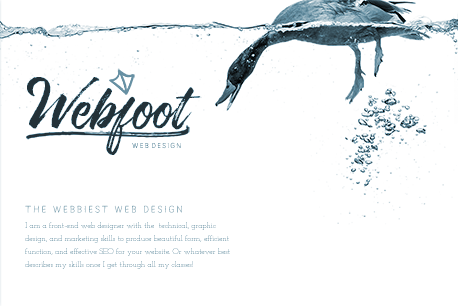
<style>
.page{position:relative;width:458px;height:306px;background:#ffffff}
.page>*{position:absolute;margin:0}
.t1{font:69.6px "TwilightScript";color:#233239}
.t2{font:78.3px "TwilightScript";color:#233239}
.t3{font:69.6px "TwilightScript";letter-spacing:-0.025em;color:#233239}
.t4{font:7.2px "MilaScript-SansLight"}
.t5{font:7.2px "MilaScript-SansLight";letter-spacing:0.2em}
.t6{font:9.6px "MilaScript-SansLight"}
.t7{font:8px/12.8px "JosefinSlab";letter-spacing:-0.01em}
</style>
<div class="page">
<p class="t1" style="left:27px;top:77px;width:174px;height:78px"><span class="t2">W</span>e<span class="t3">b</span>foot</p>
<p class="t4" style="left:132px;top:142px;width:49px;height:7px">we<span class="t5">b</span>design</p>
<p class="t6" style="left:25px;top:205px;width:157px;height:8px">The webbiest web design</p>
<p class="t7" style="left:25px;top:222px;width:205px;height:47px">I am a front-end web designer with the  technical, graphic design, and marketing skills to produce beautiful form, efficient function, and effective SEO for your website. Or whatever best describes my skills once I get through all my classes!</p>
</div>
